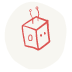
<style>
.page{position:relative;width:72px;height:72px;background:#f7f6f1}
.page>*{position:absolute;margin:0}
.t1{font:93.1px "TombatsThree";color:#f7f6f1}
.t2{font:56.5px "Tombots";color:#dc5553}
</style>
<div class="page">
<p class="t1" style="left:4px;top:1px;width:63px;height:69px">w</p>
<p class="t2" style="left:21px;top:6px;width:30px;height:45px">l</p>
</div>
